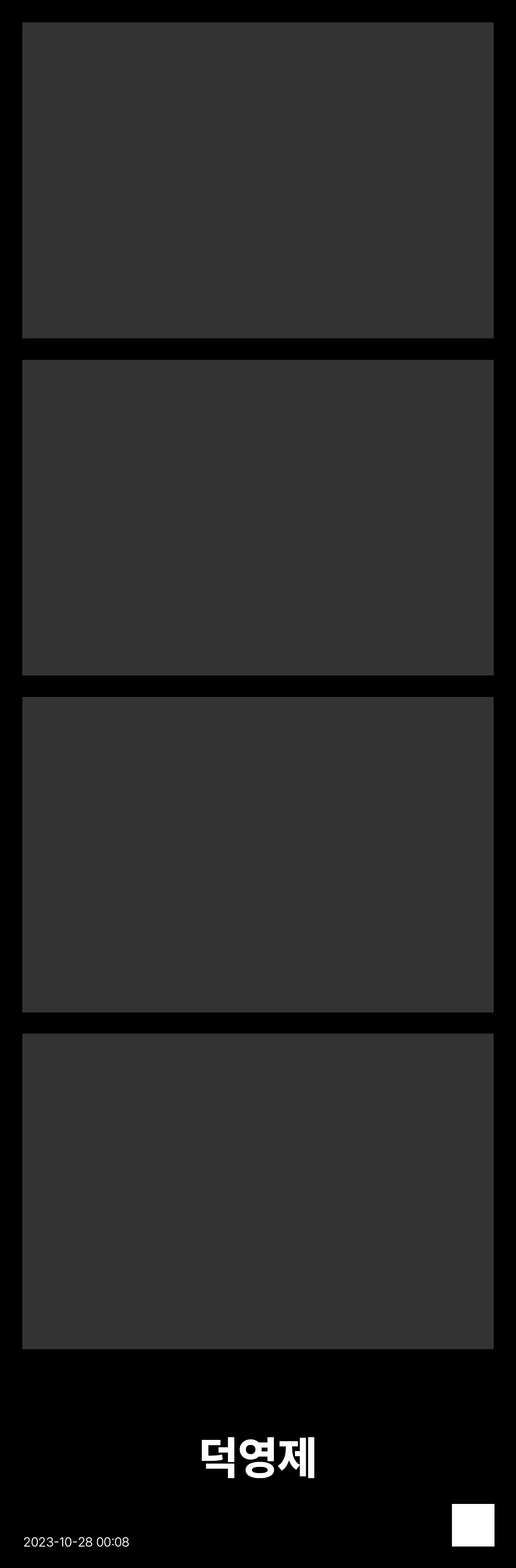
<style>
.page{position:relative;width:516px;height:1568px;background:#333333}
.page>*{position:absolute;margin:0}
.t1{font:45.6px "Pretendard-ExtraBold";color:#ffffff}
.t2{font:12.9px "Pretendard-Light";color:#ffffff}
</style>
<div class="page">
<p class="t1" style="left:202px;top:1437px;width:112px;height:41px">덕영제</p>
<p class="t2" style="left:24px;top:1537px;width:105px;height:10px">2023-10-28 00:08</p>
</div>
